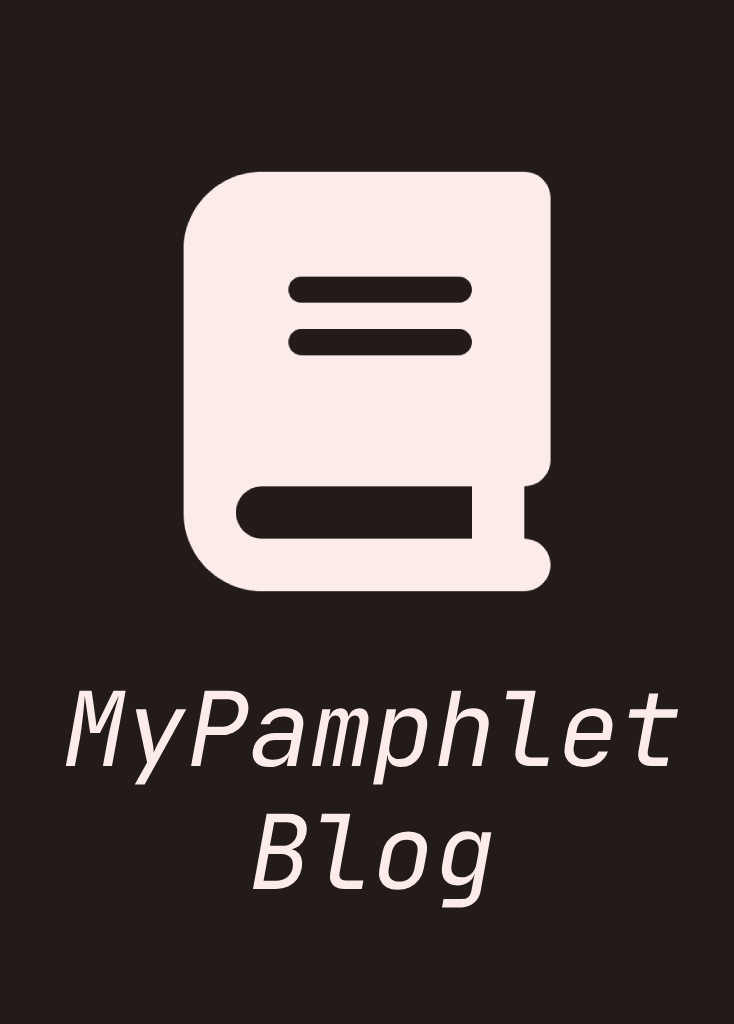
<style>
.page{position:relative;width:734px;height:1024px;background:#221b1a}
.page>*{position:absolute;margin:0}
.t1{font:103px "JetBrainsMono-Regular";color:#fcece9;font-style:italic}
</style>
<div class="page">
<p class="t1" style="left:65px;top:690px;width:614px;height:218px;text-align:center">MyPamphlet<br>Blog</p>
</div>
